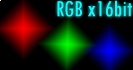
<style>
.page{position:relative;width:133px;height:70px;background:#000000}
.page>*{position:absolute;margin:0}
.t1{font:24px "TwCenMT-Condensed";color:#18f7fa}
</style>
<div class="page">
<p class="t1" style="left:57px;top:0px;width:75px;height:17px">RGB x16bit</p>
</div>
